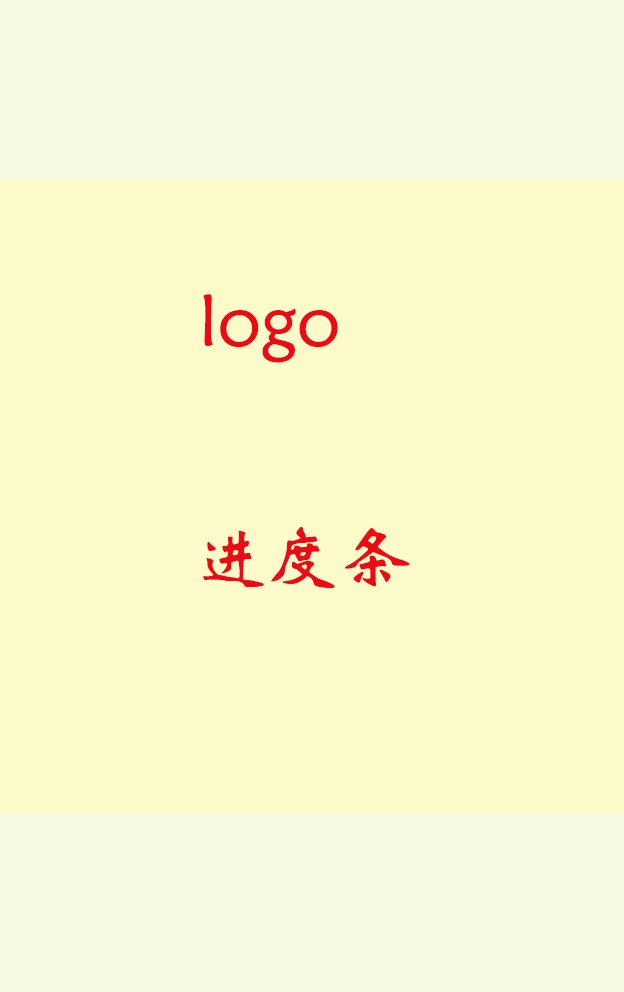
<style>
.page{position:relative;width:624px;height:992px;background:#fefbcb}
.page>*{position:absolute;margin:0}
.t1{font:72px "STXinwei";color:#ec0a15}
</style>
<div class="page">
<p class="t1" style="left:203px;top:294px;width:135px;height:69px">logo</p>
<p class="t1" style="left:203px;top:526px;width:207px;height:62px">进度条</p>
</div>
